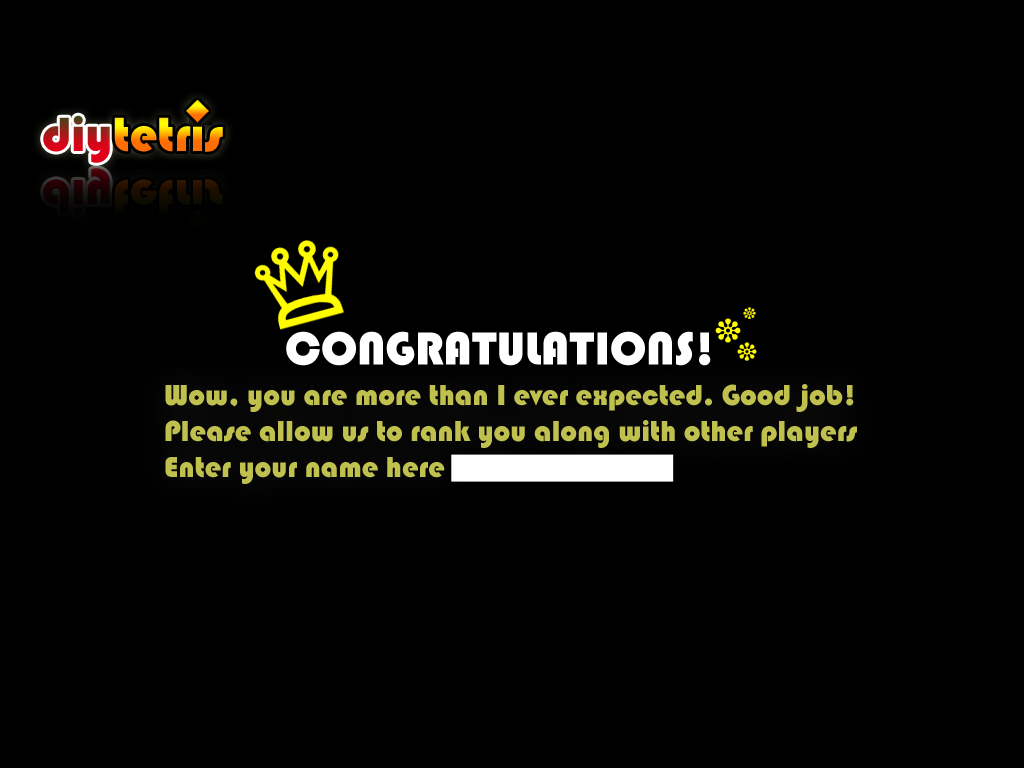
<style>
.page{position:relative;width:1024px;height:768px;background:#000000}
.page>*{position:absolute;margin:0}
.t1{font:48px "Bauhaus93";color:#ffffff}
.t2{font:30px "Bauhaus93";color:#bfc04e}
</style>
<div class="page">
<p class="t1" style="left:286px;top:331px;width:425px;height:35px">CONGRATULATIONS!</p>
<p class="t2" style="left:165px;top:384px;width:692px;height:100px">Wow, you are more than I ever expected. Good job!<br>Please allow us to rank you along with other players<br>Enter your name here</p>
</div>
